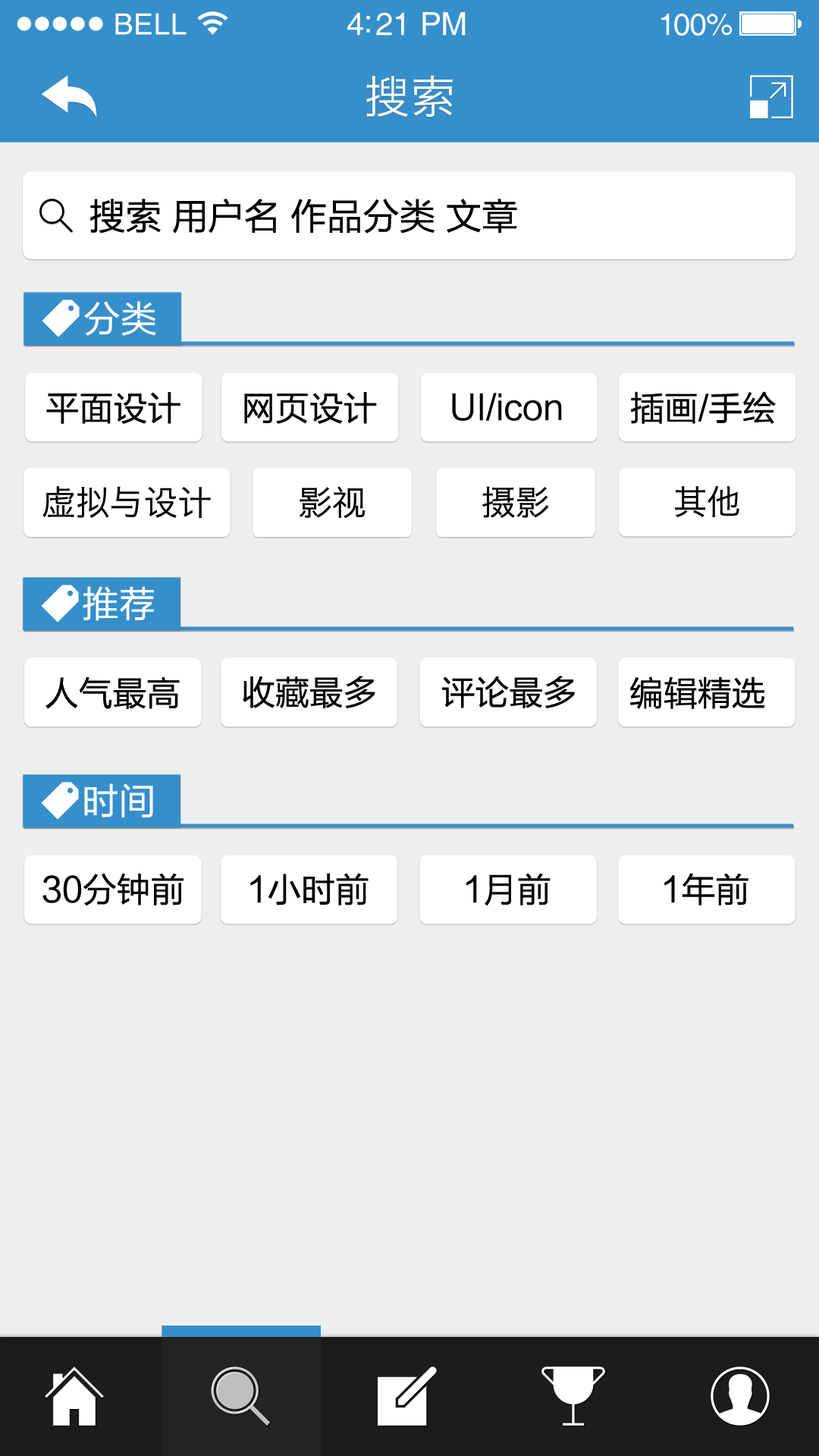
<style>
.page{position:relative;width:819px;height:1456px;background:#eeeeee}
.page>*{position:absolute;margin:0}
.t1{font:29.3px "Helvetica";letter-spacing:0.02em;color:#ffffff}
.t2{font:31.8px "Helvetica";letter-spacing:-0.02em;color:#ffffff}
.t3{font:30.6px "Helvetica";letter-spacing:-0.02em;color:#ffffff}
.t4{font:45.5px "HiraginoSansGB-W3";letter-spacing:0.025em;color:#ffffff}
.t5{font:36.4px "FZLTHJW--GB1-0";color:#000000}
.t6{font:36.4px "FZLTHJW--GB1-0";letter-spacing:0.01em;color:#ffffff}
.t7{font:34.1px "FZLTHJW--GB1-0";color:#000000}
.t8{font:34.1px "HiraginoSansGB-W3";color:#000000}
</style>
<div class="page">
<p class="t1" style="left:115px;top:13px;width:72px;height:22px">BELL</p>
<p class="t2" style="left:347px;top:12px;width:119px;height:24px">4:21 PM</p>
<p class="t3" style="left:661px;top:14px;width:72px;height:22px">100%</p>
<p class="t4" style="left:366px;top:75px;width:87px;height:42px">搜索</p>
<p class="t5" style="left:90px;top:198px;width:427px;height:36px">搜索 用户名 作品分类 文章</p>
<p class="t6" style="left:84px;top:301px;width:72px;height:35px">分类</p>
<p class="t7" style="left:46px;top:392px;width:134px;height:32px">平面设计</p>
<p class="t7" style="left:244px;top:392px;width:133px;height:32px">网页设计</p>
<p class="t7" style="left:452px;top:393px;width:110px;height:28px">UI/icon</p>
<p class="t7" style="left:631px;top:391px;width:145px;height:33px">插画/手绘</p>
<p class="t8" style="left:675px;top:485px;width:64px;height:32px">其他</p>
<p class="t8" style="left:42px;top:486px;width:169px;height:32px">虚拟与设计</p>
<p class="t8" style="left:300px;top:486px;width:66px;height:33px">影视</p>
<p class="t8" style="left:482px;top:486px;width:67px;height:32px">摄影</p>
<p class="t6" style="left:83px;top:586px;width:71px;height:35px">推荐</p>
<p class="t7" style="left:45px;top:676px;width:135px;height:33px">人气最高</p>
<p class="t7" style="left:243px;top:676px;width:132px;height:32px">收藏最多</p>
<p class="t7" style="left:442px;top:676px;width:133px;height:32px">评论最多</p>
<p class="t7" style="left:630px;top:676px;width:135px;height:33px">编辑精选</p>
<p class="t6" style="left:84px;top:783px;width:69px;height:34px">时间</p>
<p class="t7" style="left:42px;top:873px;width:142px;height:32px">30分钟前</p>
<p class="t7" style="left:250px;top:873px;width:119px;height:32px">1小时前</p>
<p class="t7" style="left:466px;top:873px;width:85px;height:32px">1月前</p>
<p class="t7" style="left:664px;top:873px;width:84px;height:32px">1年前</p>
</div>
